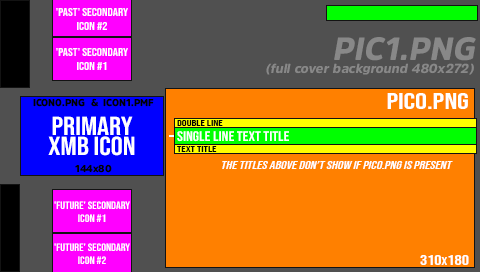
<style>
.page{position:relative;width:480px;height:272px;background:#ff8000}
.page>*{position:absolute;margin:0}
.t1{font:11.3px/14px "BebasNeue-Regular";color:#ffffff;scale:1.15 1}
.t2{font:13px/13px "AmsiPro-Black";color:#888888;font-style:italic}
.t3{font:32px/13px "AmsiPro-Black";color:#888888;font-style:italic}
.t4{font:9.8px/33px "AmsiPro-Black";color:#000000}
.t5{font:10.5px/26px "BebasNeue-Regular";color:#ffffff;font-style:italic;scale:1.33 1}
.t6{font:22.5px/26px "BebasNeue-Regular";color:#ffffff;scale:1.33 1}
.t7{font:13.5px/26px "BebasNeue-Regular";color:#ffffff;scale:1.33 1}
.t8{font:10.5px/26px "BebasNeue-Regular";color:#ffffff;scale:1.33 1}
.t9{font:26.1px/20px "BebasNeue-Regular";color:#ffffff;scale:1.15 1}
.t10{font:8.4px/26px "BebasNeue-Regular";color:#000000;scale:1.43 1}
.t11{font:13.9px "BebasNeue-Regular";color:#ffffff;scale:1.15 1}
.t12{font:10.4px/13px "BebasNeue-Regular";color:#ffffff;scale:1.15 1}
</style>
<div class="page">
<p class="t1" style="left:56px;top:8px;width:72px;height:22px;text-align:center">'Past' Secondary icon #2</p>
<p class="t2" style="left:266px;top:37px;width:210px;height:38px;text-align:right"><span class="t3">PIC1.PNG<br></span>(full cover background 480x272)</p>
<p class="t1" style="left:56px;top:48px;width:72px;height:22px;text-align:center">'Past' Secondary icon #1</p>
<p class="t4" style="left:33px;top:98px;width:121px;height:75px;text-align:center">ICON0.PNG  &amp;  ICON1.PMF<br><br>144x80</p>
<p class="t5" style="left:222px;top:93px;width:247px;height:172px;text-align:right"><span class="t6">PIC0.PNG<br><br><br></span>The titles above don’t show if PIC0.PNG is present<br><br><br><span class="t7">310</span><span class="t8">x</span><span class="t7">180</span></p>
<p class="t9" style="left:48px;top:116px;width:87px;height:40px;text-align:center">Primary<br>XMB Icon</p>
<p class="t10" style="left:177px;top:120px;width:46px;height:32px">Double Line<br>Text Title</p>
<p class="t11" style="left:177px;top:131px;width:112px;height:11px">SINGLE LINE TEXT TITLE</p>
<p class="t12" style="left:54px;top:201px;width:76px;height:21px;text-align:center">'FUTURE' Secondary icon #1</p>
<p class="t12" style="left:54px;top:243px;width:76px;height:21px;text-align:center">'FUTURE' Secondary icon #2</p>
</div>
